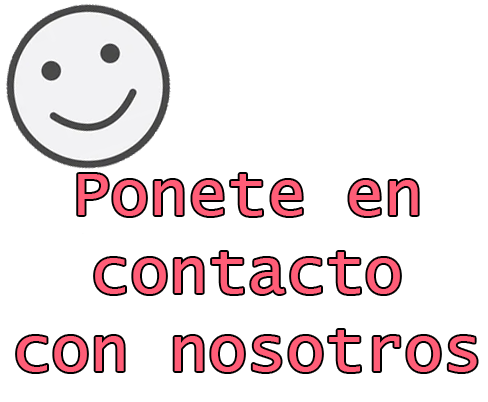
<style>
.page{position:relative;width:488px;height:402px;background:#ffffff}
.page>*{position:absolute;margin:0}
.t1{font:65px "LucidaConsole";color:#ff5d77}
</style>
<div class="page">
<p class="t1" style="left:17px;top:174px;width:460px;height:198px;text-align:center">Ponete en<br>contacto<br>con nosotros</p>
</div>
